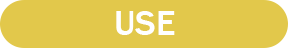
<style>
.page{position:relative;width:288px;height:48px;background:#e2c84b}
.page>*{position:absolute;margin:0}
.t1{font:35.9px "FranklinGothic-Medium";color:#ffffff}
</style>
<div class="page">
<p class="t1" style="left:116px;top:11px;width:59px;height:24px">USE</p>
</div>
